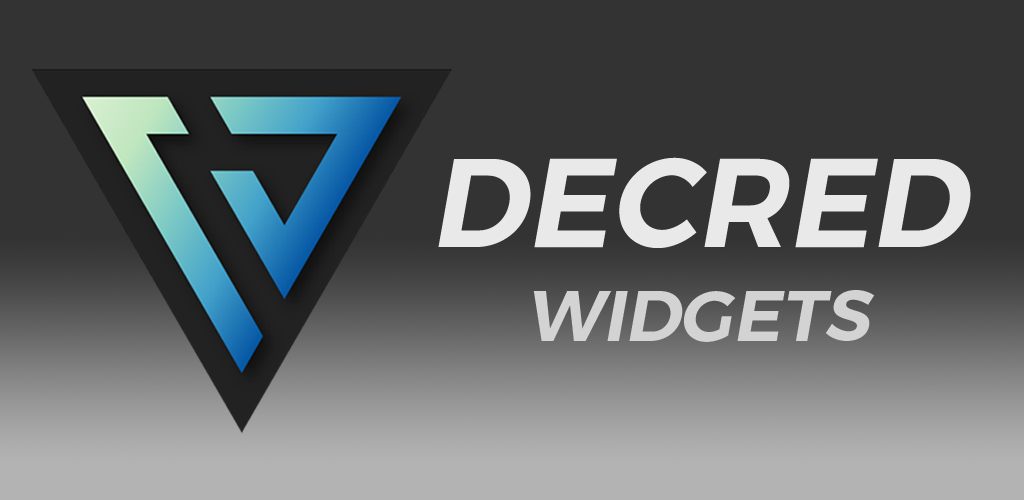
<style>
.page{position:relative;width:1024px;height:500px;background:#333333}
.page>*{position:absolute;margin:0}
.t1{font:125px "Montserrat-SemiBold";color:#e9e9e9;font-style:italic}
.t2{font:72px "Montserrat-SemiBold";color:#d2d2d2;font-style:italic}
</style>
<div class="page">
<p class="t1" style="left:438px;top:157px;width:533px;height:91px">DECRED</p>
<p class="t2" style="left:533px;top:290px;width:342px;height:52px">WIDGETS</p>
</div>
